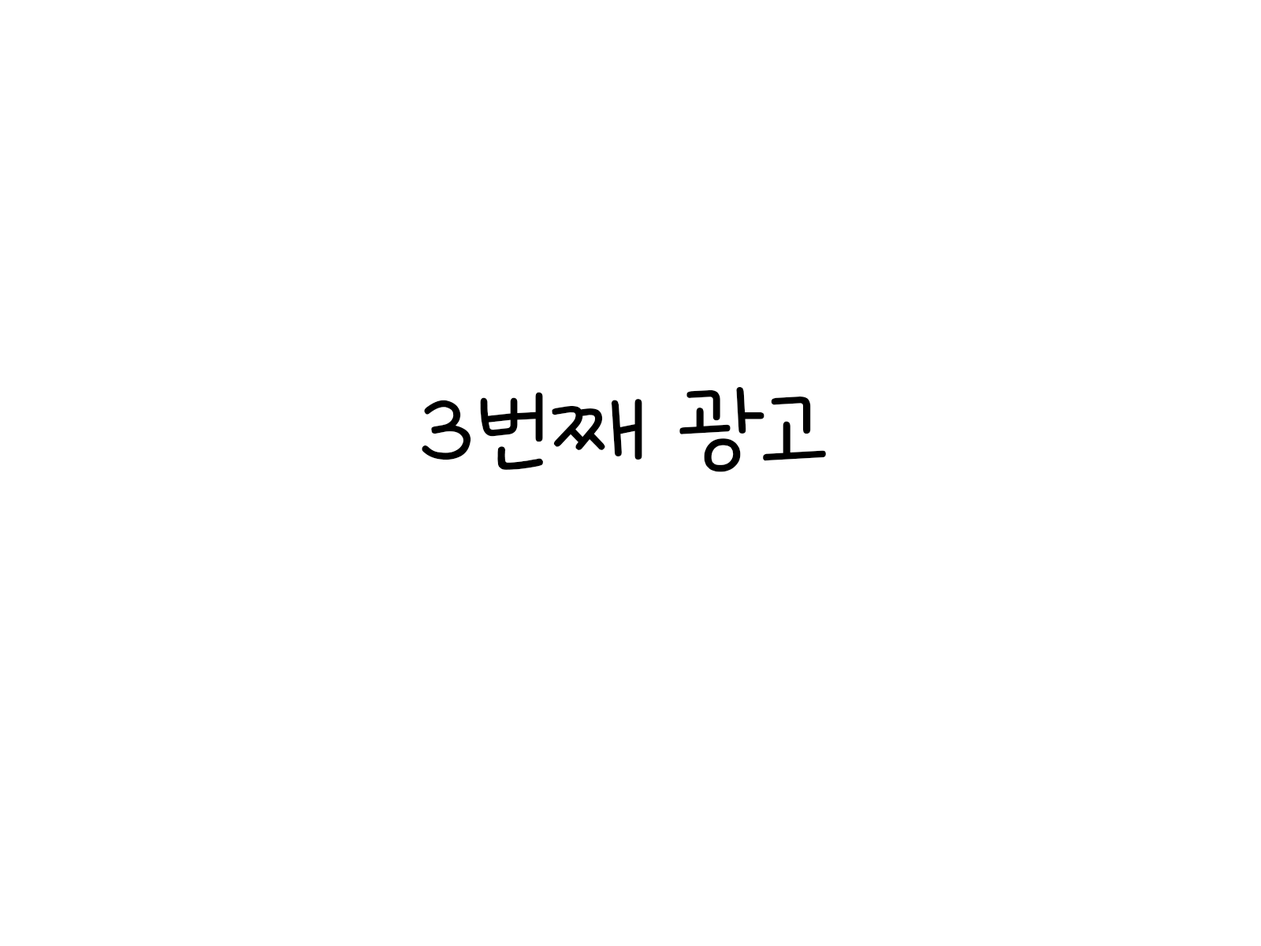
<style>
.page{position:relative;width:1261px;height:946px;background:#ffffff}
.page>*{position:absolute;margin:0}
.t1{font:127px "GangwonEduSaeeumMedium";letter-spacing:-0.01em;color:#000000}
</style>
<div class="page">
<p class="t1" style="left:422px;top:386px;width:404px;height:86px">3번째 광고</p>
</div>
